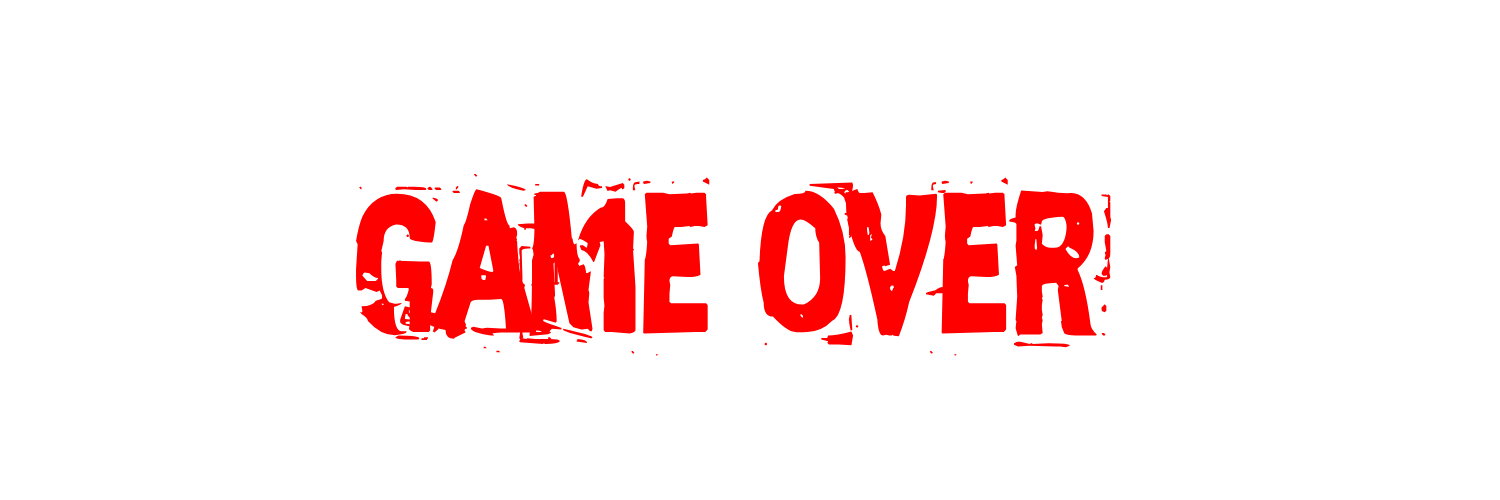
<style>
.page{position:relative;width:1500px;height:500px;background:#ffffff}
.page>*{position:absolute;margin:0}
.t1{font:163px "Zero&Zero-Is";color:#ff0000}
</style>
<div class="page">
<p class="t1" style="left:356px;top:174px;width:756px;height:182px">game Over</p>
</div>
